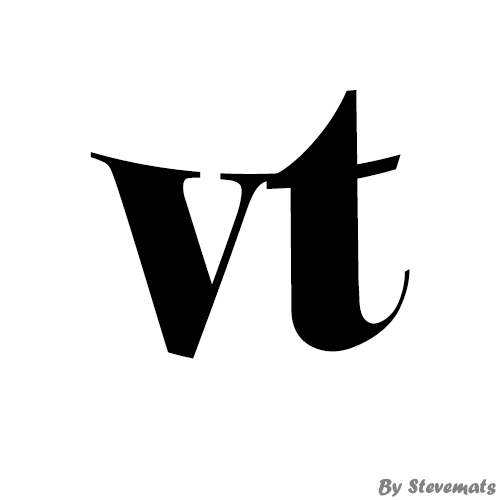
<style>
.page{position:relative;width:500px;height:500px;background:#ffffff}
.page>*{position:absolute;margin:0}
.t1{font:341.7px "Elephant-Regular";color:#000000}
.t2{font:20.8px "ForteMT";color:#828282}
</style>
<div class="page">
<p class="t1" style="left:90px;top:90px;width:320px;height:269px">vt</p>
<p class="t2" style="left:378px;top:478px;width:118px;height:19px">By Stevemats</p>
</div>
